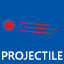
<style>
.page{position:relative;width:64px;height:64px;background:#0054a6}
.page>*{position:absolute;margin:0}
.t1{font:11.7px "SegoeUI-Semibold";color:#ffffff}
</style>
<div class="page">
<p class="t1" style="left:2px;top:51px;width:61px;height:9px">PROJECTILE</p>
</div>
